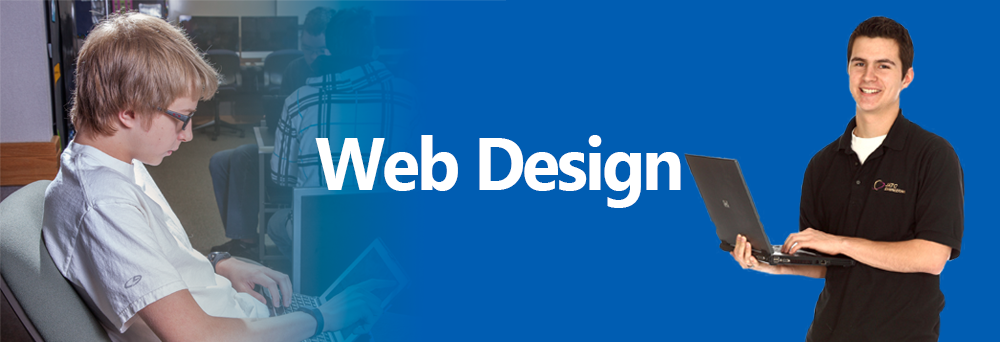
<style>
.page{position:relative;width:1000px;height:342px;background:#005db2}
.page>*{position:absolute;margin:0}
.t1{font:73.9px "MyanmarText-Bold";letter-spacing:-0.04em;color:#ffffff;scale:0.94 1}
</style>
<div class="page">
<p class="t1" style="left:315px;top:135px;width:366px;height:73px">Web Design</p>
</div>
